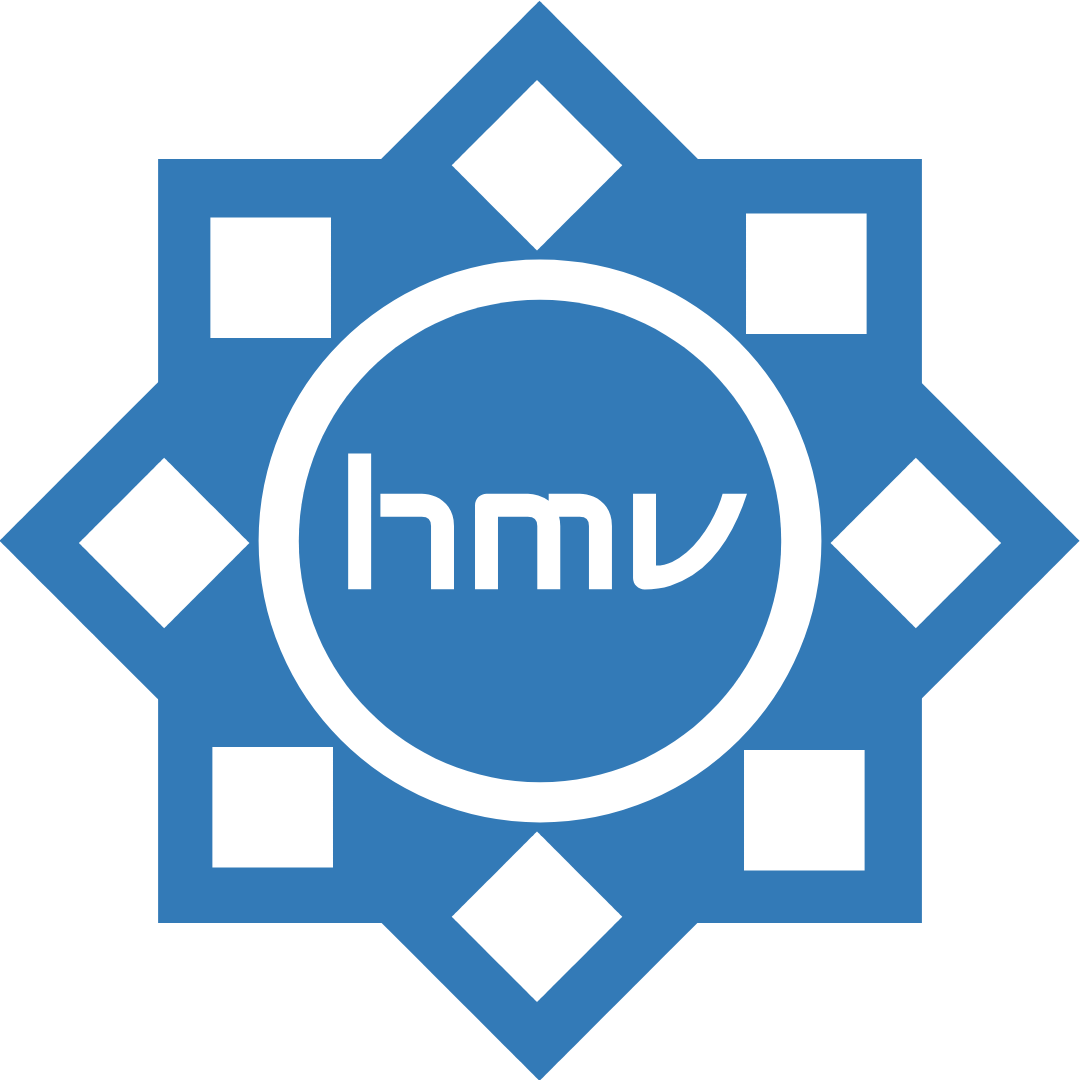
<style>
.page{position:relative;width:1080px;height:1080px;background:#ffffff}
.page>*{position:absolute;margin:0}
.t1{font:180.9px "Audiowide-Regular";color:#ffffff}
</style>
<div class="page">
<p class="t1" style="left:348px;top:453px;width:399px;height:137px">hmv</p>
</div>
